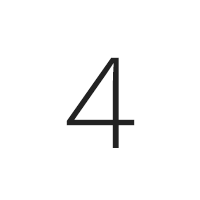
<style>
.page{position:relative;width:200px;height:200px;background:#ffffff}
.page>*{position:absolute;margin:0}
.t1{font:125.2px "OpenSans-Light";color:#222222}
</style>
<div class="page">
<p class="t1" style="left:66px;top:57px;width:69px;height:91px">4</p>
</div>
